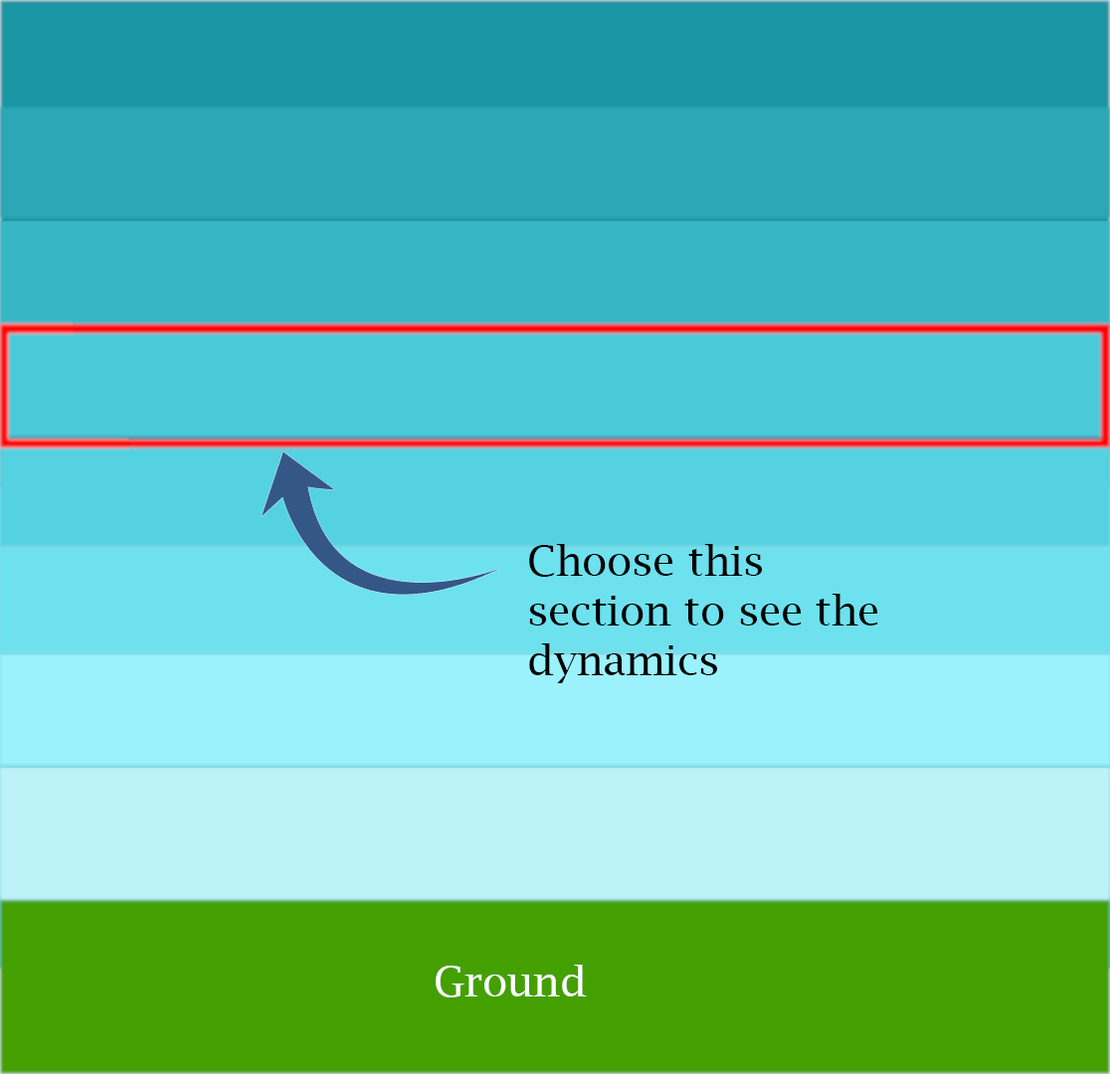
<style>
.page{position:relative;width:1110px;height:1074px}
.page>*{position:absolute;margin:0}
.t1{font:41.4px "LucidaBright";color:#000000}
.t2{font:41.4px "LucidaBright";color:#ffffff}
</style>
<div class="page">
<p class="t1" style="left:529px;top:544px;width:349px;height:139px">Choose this<br>section to see the<br>dynamics</p>
<p class="t2" style="left:436px;top:965px;width:151px;height:33px">Ground</p>
</div>
